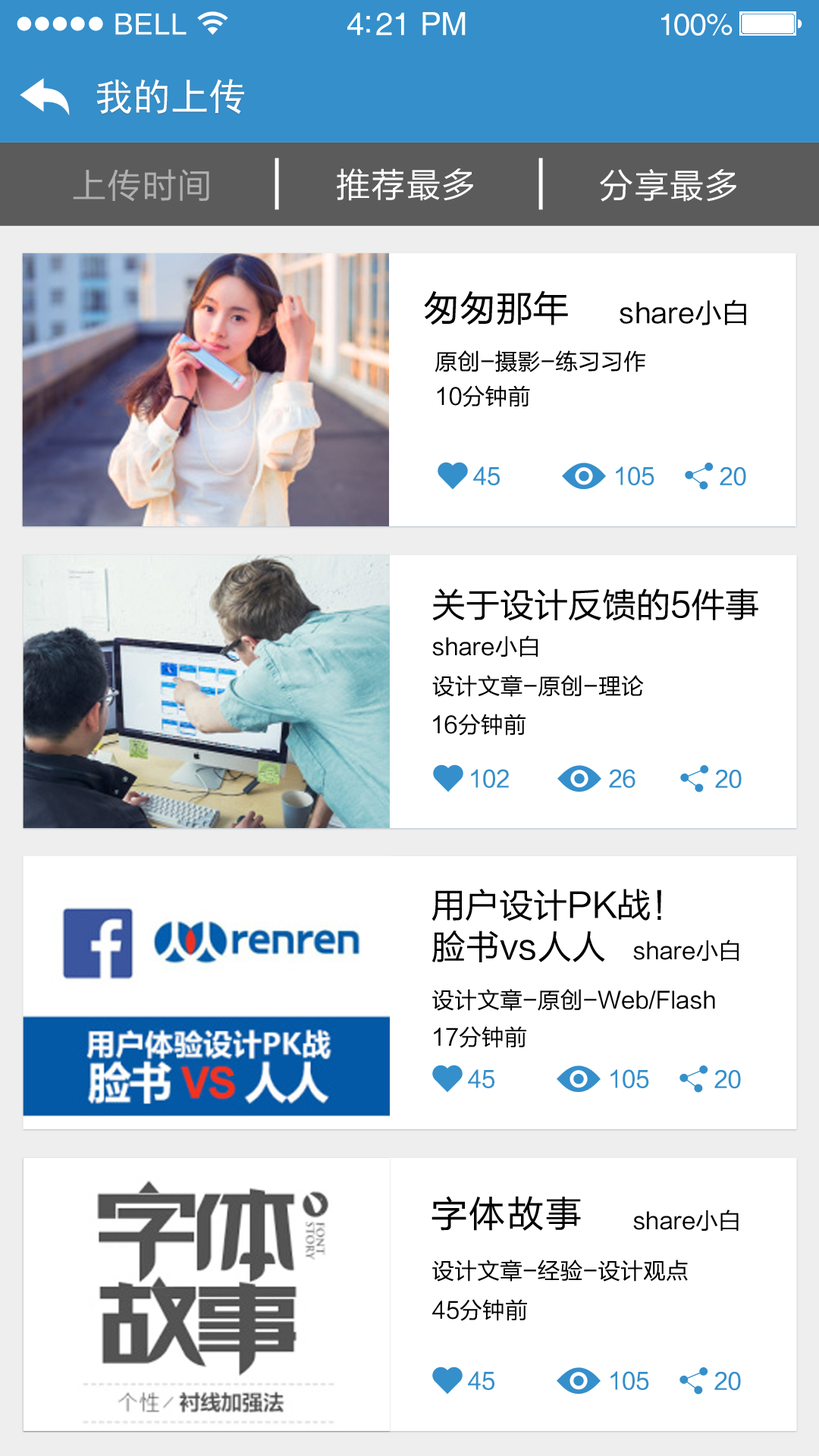
<style>
.page{position:relative;width:819px;height:1456px;background:#ffffff}
.page>*{position:absolute;margin:0}
.t1{font:29.3px "Helvetica";letter-spacing:0.02em;color:#ffffff}
.t2{font:31.8px "Helvetica";letter-spacing:-0.02em;color:#ffffff}
.t3{font:30.6px "Helvetica";letter-spacing:-0.02em;color:#ffffff}
.t4{font:37.9px "SimHei";color:#ffffff}
.t5{font:34.1px "FZLTHJW--GB1-0";letter-spacing:0.025em;color:#afafaf}
.t6{font:34.1px "FZLTHJW--GB1-0";letter-spacing:0.025em;color:#ffffff}
.t7{font:36.4px "FZLTHJW--GB1-0";color:#000000}
.t8{font:27.3px "FZLTHJW--GB1-0";color:#000000}
.t9{font:22.7px "FZLTHJW--GB1-0";color:#000000}
.t10{font:22.7px "FZLTHJW--GB1-0";color:#358fcb}
.t11{font:34.1px "FZLTHJW--GB1-0";color:#010000}
.t12{font:34.1px "FZLTHJW--GB1-0";color:#000000}
.t13{font:36.4px "FZLTHJW--GB1-0";letter-spacing:0.05em;color:#000000}
</style>
<div class="page">
<p class="t1" style="left:115px;top:13px;width:72px;height:22px">BELL</p>
<p class="t2" style="left:347px;top:12px;width:119px;height:24px">4:21 PM</p>
<p class="t3" style="left:661px;top:14px;width:72px;height:22px">100%</p>
<p class="t4" style="left:96px;top:79px;width:148px;height:36px">我的上传</p>
<p class="t5" style="left:73px;top:169px;width:136px;height:33px">上传时间</p>
<p class="t6" style="left:337px;top:168px;width:136px;height:33px">推荐最多</p>
<p class="t6" style="left:600px;top:169px;width:136px;height:33px">分享最多</p>
<p class="t7" style="left:424px;top:290px;width:144px;height:35px">匆匆那年</p>
<p class="t8" style="left:620px;top:300px;width:126px;height:25px">share小白</p>
<p class="t9" style="left:435px;top:350px;width:210px;height:22px">原创-摄影-练习习作</p>
<p class="t9" style="left:437px;top:385px;width:93px;height:22px">10分钟前</p>
<p class="t10" style="left:473px;top:466px;width:27px;height:19px">45</p>
<p class="t10" style="left:616px;top:466px;width:38px;height:19px">105</p>
<p class="t10" style="left:720px;top:467px;width:26px;height:19px">20</p>
<p class="t11" style="left:432px;top:588px;width:326px;height:33px">关于设计反馈的5件事</p>
<p class="t9" style="left:432px;top:635px;width:106px;height:22px">share小白</p>
<p class="t9" style="left:432px;top:675px;width:212px;height:22px">设计文章-原创-理论</p>
<p class="t9" style="left:433px;top:714px;width:93px;height:22px">16分钟前</p>
<p class="t10" style="left:471px;top:769px;width:38px;height:19px">102</p>
<p class="t10" style="left:609px;top:769px;width:26px;height:19px">26</p>
<p class="t10" style="left:715px;top:770px;width:27px;height:19px">20</p>
<p class="t12" style="left:431px;top:889px;width:230px;height:32px">用户设计PK战！</p>
<p class="t12" style="left:432px;top:930px;width:173px;height:32px">脸书vs人人</p>
<p class="t9" style="left:633px;top:940px;width:106px;height:21px">share小白</p>
<p class="t9" style="left:432px;top:989px;width:283px;height:22px">设计文章-原创-Web/Flash</p>
<p class="t9" style="left:434px;top:1026px;width:92px;height:22px">17分钟前</p>
<p class="t10" style="left:468px;top:1069px;width:26px;height:19px">45</p>
<p class="t10" style="left:610px;top:1069px;width:39px;height:19px">105</p>
<p class="t10" style="left:714px;top:1070px;width:27px;height:19px">20</p>
<p class="t13" style="left:431px;top:1196px;width:150px;height:35px">字体故事</p>
<p class="t9" style="left:633px;top:1210px;width:106px;height:21px">share小白</p>
<p class="t9" style="left:432px;top:1260px;width:256px;height:22px">设计文章-经验-设计观点</p>
<p class="t9" style="left:432px;top:1299px;width:95px;height:22px">45分钟前</p>
<p class="t10" style="left:468px;top:1371px;width:26px;height:19px">45</p>
<p class="t10" style="left:610px;top:1371px;width:39px;height:19px">105</p>
<p class="t10" style="left:714px;top:1372px;width:27px;height:19px">20</p>
</div>
